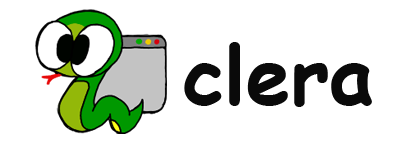
<style>
.page{position:relative;width:412px;height:144px;background:#ffffff}
.page>*{position:absolute;margin:0}
.t1{font:79.5px "ComicSansMS-Bold";color:#0a0a0a}
</style>
<div class="page">
<p class="t1" style="left:184px;top:42px;width:188px;height:65px">clera</p>
</div>
